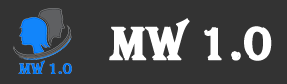
<style>
.page{position:relative;width:287px;height:84px;background:#333333}
.page>*{position:absolute;margin:0}
.t1{font:48px "Algerian";color:#ffffff;font-weight:bold}
</style>
<div class="page">
<p class="t1" style="left:109px;top:18px;width:163px;height:43px">MW 1.0</p>
</div>
